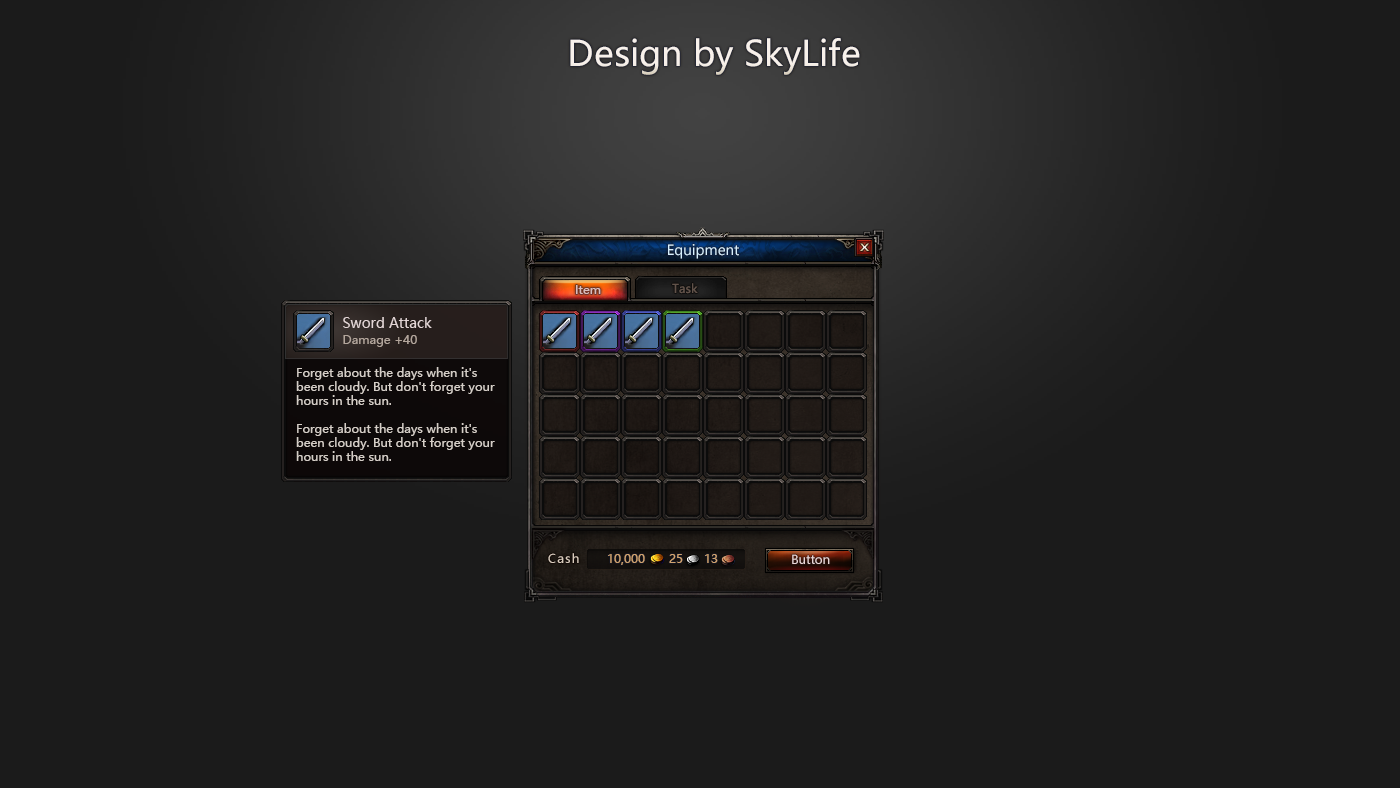
<style>
.page{position:relative;width:1400px;height:788px;background:#1b1b1b}
.page>*{position:absolute;margin:0}
.t1{font:34.8px "MicrosoftYaHei";color:#f8f1eb}
.t2{font:14px "MicrosoftYaHei";color:#d8f0fd}
.t3{font:12px "MicrosoftYaHei";color:#dabdbd}
.t4{font:12px "MicrosoftYaHei";color:#615249}
.t5{font:14px "MicrosoftYaHei";color:#e4d7d7}
.t6{font:12px "MicrosoftYaHei";color:#b3a69c}
.t7{font:12px/14px "MicrosoftYaHei";color:#d5cec7}
.t8{font:12px "MicrosoftYaHei";letter-spacing:0.1em;color:#daccbd}
.t9{font:12px "MicrosoftYaHei";color:#d0a36f}
.t10{font:12px "MicrosoftYaHei";color:#e9d6d6}
</style>
<div class="page">
<p class="t1" style="left:570px;top:38px;width:290px;height:37px">Design by SkyLife</p>
<p class="t2" style="left:668px;top:244px;width:71px;height:15px">Equipment</p>
<p class="t3" style="left:576px;top:285px;width:25px;height:9px">Item</p>
<p class="t4" style="left:672px;top:283px;width:26px;height:11px">Task</p>
<p class="t5" style="left:343px;top:317px;width:89px;height:11px">Sword Attack</p>
<p class="t6" style="left:343px;top:335px;width:74px;height:12px">Damage +40</p>
<p class="t7" style="left:296px;top:367px;width:199px;height:94px">Forget about the days when it's been cloudy. But don't forget your hours in the sun.<br><br>Forget about the days when it's been cloudy. But don't forget your hours in the sun.</p>
<p class="t8" style="left:548px;top:553px;width:31px;height:10px">Cash</p>
<p class="t9" style="left:608px;top:554px;width:37px;height:11px">10,000</p>
<p class="t9" style="left:669px;top:554px;width:14px;height:9px">25</p>
<p class="t9" style="left:705px;top:554px;width:13px;height:9px">13</p>
<p class="t10" style="left:792px;top:554px;width:38px;height:10px">Button</p>
</div>
